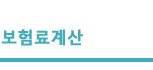
<style>
.page{position:relative;width:153px;height:70px;background:#ffffff}
.page>*{position:absolute;margin:0}
.t1{font:51px "MalgunGothicBold";color:#40adba}
.t2{font:17px "MalgunGothicBold";letter-spacing:-0.005em;color:#40adba;font-weight:bold;scale:0.95 1}
</style>
<div class="page">
<p class="t1" style="left:1px;top:29px;width:82px;height:17px"><span class="t2">보험료계산 </span>tkdtlr</p>
</div>
